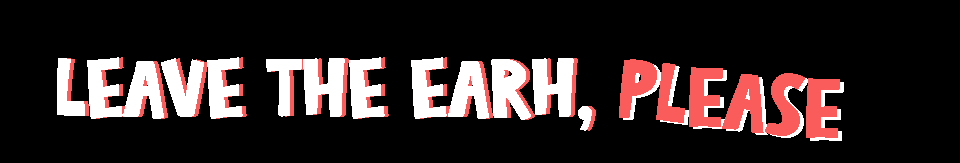
<style>
.page{position:relative;width:960px;height:163px;background:#000000}
.page>*{position:absolute;margin:0}
.t1{font:85px "MainPointRegular";letter-spacing:-0.02em;color:#ffffff}
.t2{font:85px "MainPointRegular";letter-spacing:-0.02em;color:#fa5c5c}
</style>
<div class="page">
<p class="t1" style="left:57px;top:57px;width:535px;height:74px">leave the earh,</p>
<p class="t1" style="left:61px;top:57px;width:535px;height:74px">leave the earh,</p>
<p class="t2" style="left:619px;top:59px;width:221px;height:79px;rotate:6deg">please</p>
<p class="t2" style="left:623px;top:61px;width:221px;height:80px;rotate:6deg">please</p>
</div>
